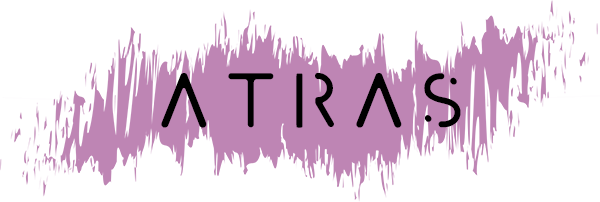
<style>
.page{position:relative;width:600px;height:202px;background:#ffffff}
.page>*{position:absolute;margin:0}
.t1{font:75.8px "Avayx";color:#000000}
</style>
<div class="page">
<p class="t1" style="left:161px;top:73px;width:300px;height:55px">atras</p>
</div>
